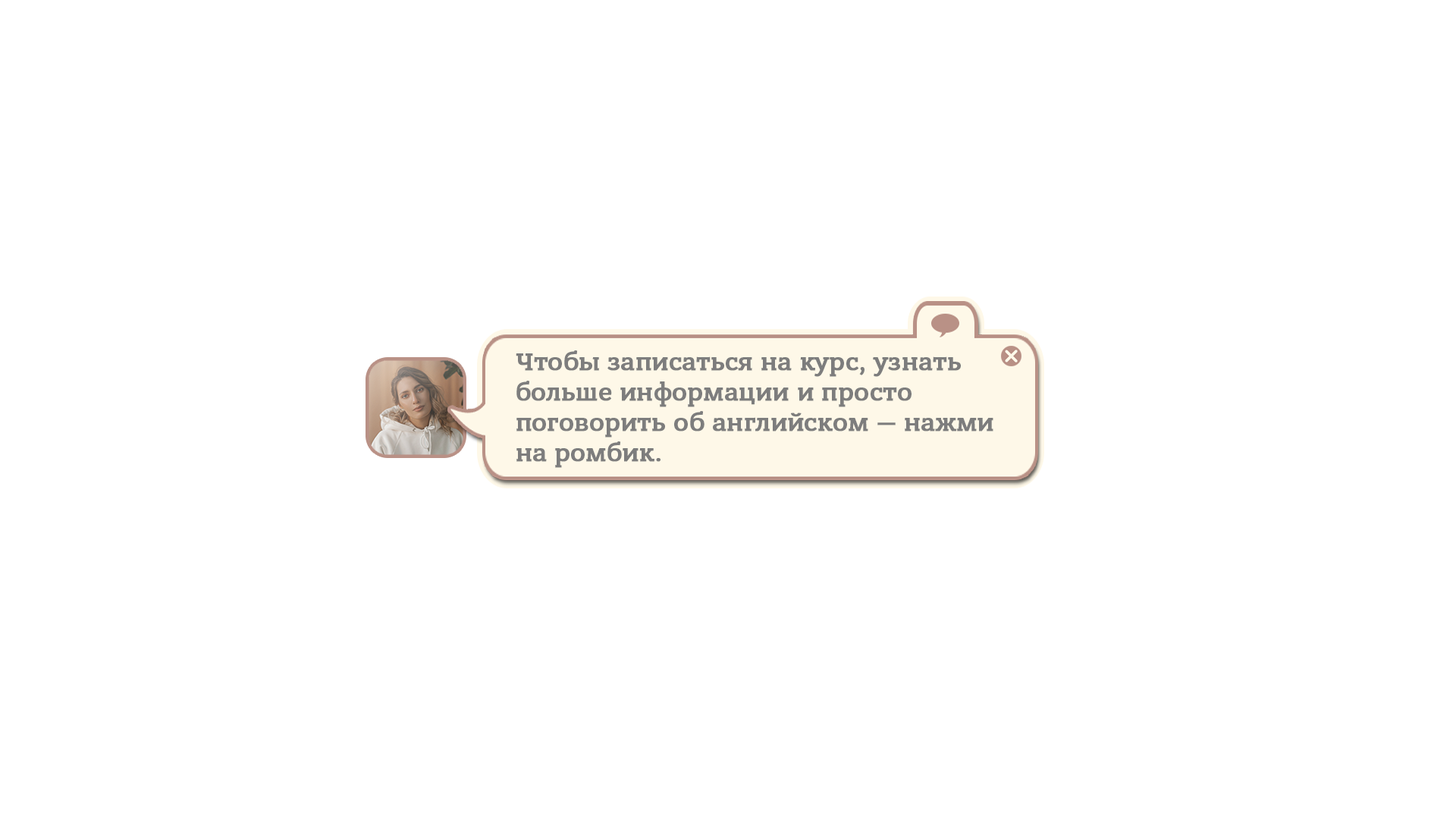
<style>
.page{position:relative;width:1456px;height:819px;background:#ffffff}
.page>*{position:absolute;margin:0}
.t1{font:25.3px "BanderaProMedium";color:#7d7d7d;font-weight:bold}
</style>
<div class="page">
<p class="t1" style="left:516px;top:350px;width:477px;height:118px">Чтобы записаться на курс, узнать <br>больше информации и просто <br>поговорить об английском — нажми <br>на ромбик.</p>
</div>
